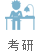
<style>
.page{position:relative;width:40px;height:55px;background:#ffffff}
.page>*{position:absolute;margin:0}
.t1{font:22.5px "SimSun";letter-spacing:0.075em;color:#666666;font-variant:small-caps}
</style>
<div class="page">
<p class="t1" style="left:8px;top:39px;width:25px;height:12px">考研</p>
</div>
